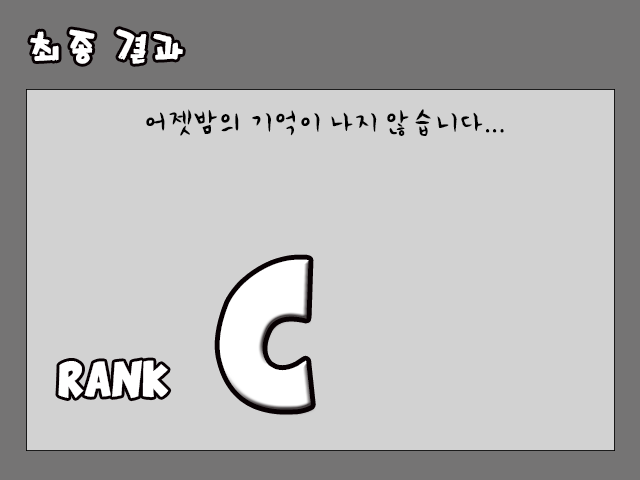
<style>
.page{position:relative;width:640px;height:480px;background:#d2d2d2}
.page>*{position:absolute;margin:0}
.t1{font:36px "Mpop";color:#ffffff}
.t2{font:30px "PNHCartoon";color:#000000}
.t3{font:100px "ComixLoud";color:#ffffff}
.t4{font:24px "ComixLoud";color:#ffffff}
</style>
<div class="page">
<p class="t1" style="left:30px;top:29px;width:153px;height:35px">최종 결과</p>
<p class="t2" style="left:146px;top:109px;width:358px;height:27px">어젯밤의 기억이 나지 않습니다...</p>
<p class="t3" style="left:219px;top:259px;width:92px;height:151px">C</p>
<p class="t4" style="left:58px;top:360px;width:111px;height:39px">RANK</p>
</div>
